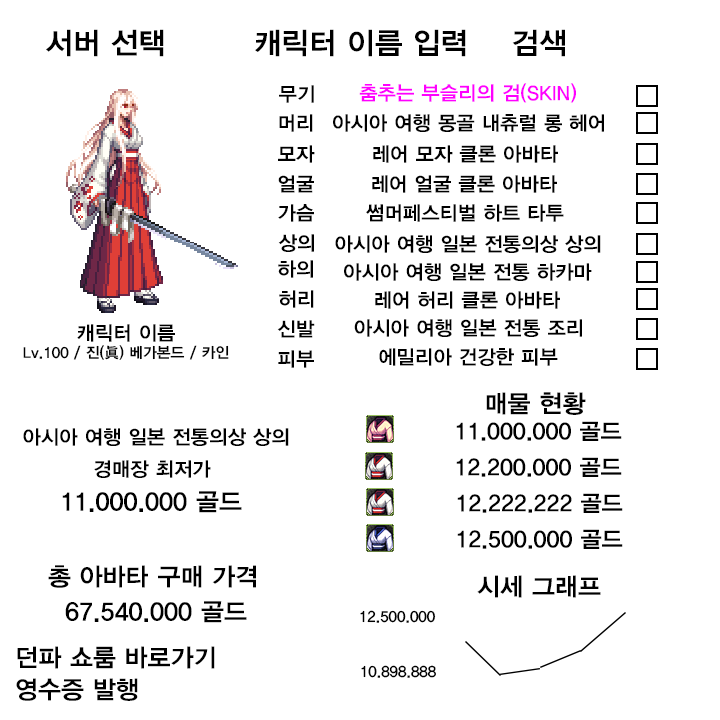
<style>
.page{position:relative;width:720px;height:720px;background:#ffffff}
.page>*{position:absolute;margin:0}
.t1{font:30px "YDIYGO340";color:#000000}
.t2{font:20px "YDIYGO340";color:#000000}
.t3{font:20px "YDIYGO340";color:#ff00ff}
.t4{font:15px "YDIYGO340";color:#000000}
.t5{font:25px "YDIYGO340";color:#000000}
.t6{font:23px "YDIYGO340";color:#000000}
</style>
<div class="page">
<p class="t1" style="left:46px;top:29px;width:118px;height:28px">서버 선택</p>
<p class="t1" style="left:255px;top:29px;width:211px;height:28px">캐릭터 이름 입력</p>
<p class="t1" style="left:512px;top:29px;width:53px;height:28px">검색</p>
<p class="t2" style="left:279px;top:85px;width:35px;height:18px">무기</p>
<p class="t3" style="left:359px;top:83px;width:217px;height:20px">춤추는 부슬리의 검(SKIN)</p>
<p class="t2" style="left:279px;top:114px;width:34px;height:18px">머리</p>
<p class="t2" style="left:333px;top:114px;width:271px;height:18px">아시아 여행 몽골 내츄럴 롱 헤어</p>
<p class="t2" style="left:278px;top:145px;width:37px;height:18px">모자</p>
<p class="t2" style="left:373px;top:145px;width:185px;height:18px">레어 모자 클론 아바타</p>
<p class="t2" style="left:278px;top:175px;width:36px;height:18px">얼굴</p>
<p class="t2" style="left:372px;top:175px;width:185px;height:18px">레어 얼굴 클론 아바타</p>
<p class="t2" style="left:278px;top:204px;width:36px;height:18px">가슴</p>
<p class="t2" style="left:366px;top:204px;width:198px;height:18px">썸머페스티벌 하트 타투</p>
<p class="t2" style="left:278px;top:234px;width:36px;height:18px">상의</p>
<p class="t2" style="left:335px;top:235px;width:266px;height:18px">아시아 여행 일본 전통의상 상의</p>
<p class="t2" style="left:278px;top:260px;width:35px;height:18px">하의</p>
<p class="t2" style="left:344px;top:263px;width:248px;height:18px">아시아 여행 일본 전통 하카마</p>
<p class="t2" style="left:279px;top:290px;width:35px;height:18px">허리</p>
<p class="t2" style="left:375px;top:291px;width:185px;height:18px">레어 허리 클론 아바타</p>
<p class="t2" style="left:77px;top:324px;width:98px;height:18px">캐릭터 이름</p>
<p class="t2" style="left:277px;top:320px;width:38px;height:18px">신발</p>
<p class="t2" style="left:354px;top:319px;width:228px;height:18px">아시아 여행 일본 전통 조리</p>
<p class="t4" style="left:23px;top:345px;width:206px;height:15px">Lv.100 / 진(眞) 베가본드 / 카인</p>
<p class="t2" style="left:278px;top:350px;width:36px;height:18px">피부</p>
<p class="t2" style="left:379px;top:348px;width:179px;height:18px">에밀리아 건강한 피부</p>
<p class="t5" style="left:486px;top:392px;width:100px;height:23px">매물 현황</p>
<p class="t6" style="left:456px;top:421px;width:166px;height:20px">11.000.000 골드</p>
<p class="t2" style="left:23px;top:428px;width:266px;height:18px">아시아 여행 일본 전통의상 상의</p>
<p class="t2" style="left:94px;top:460px;width:117px;height:18px">경매장 최저가</p>
<p class="t6" style="left:456px;top:457px;width:166px;height:20px">12.200.000 골드</p>
<p class="t5" style="left:62px;top:491px;width:180px;height:22px">11.000.000 골드</p>
<p class="t6" style="left:457px;top:493px;width:166px;height:20px">12.222.222 골드</p>
<p class="t6" style="left:457px;top:529px;width:166px;height:20px">12.500.000 골드</p>
<p class="t5" style="left:48px;top:565px;width:208px;height:23px">총 아바타 구매 가격</p>
<p class="t5" style="left:477px;top:575px;width:124px;height:23px">시세 그래프</p>
<p class="t5" style="left:65px;top:601px;width:182px;height:22px">67.540.000 골드</p>
<p class="t4" style="left:360px;top:610px;width:76px;height:13px">12.500.000</p>
<p class="t5" style="left:17px;top:646px;width:198px;height:23px">던파 쇼룸 바로가기</p>
<p class="t4" style="left:361px;top:665px;width:75px;height:13px">10.898.888</p>
<p class="t5" style="left:16px;top:678px;width:122px;height:23px">영수증 발행</p>
</div>
